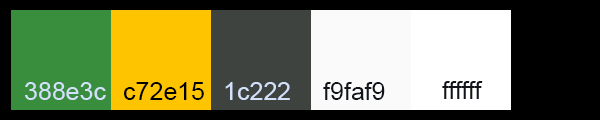
<style>
.page{position:relative;width:600px;height:120px;background:#000000}
.page>*{position:absolute;margin:0}
.t1{font:25px "ArialMT";color:#d3e0fa}
.t2{font:25px "ArialMT";color:#000000}
.t3{font:25px "ArialMT";color:#11141a}
</style>
<div class="page">
<p class="t1" style="left:25px;top:82px;width:81px;height:18px">388e3c</p>
<p class="t2" style="left:124px;top:82px;width:80px;height:18px">c72e15</p>
<p class="t1" style="left:225px;top:82px;width:65px;height:18px">1c22298</p>
<p class="t3" style="left:323px;top:82px;width:62px;height:18px">f9faf9</p>
<p class="t3" style="left:442px;top:81px;width:41px;height:18px">ffffff</p>
</div>
